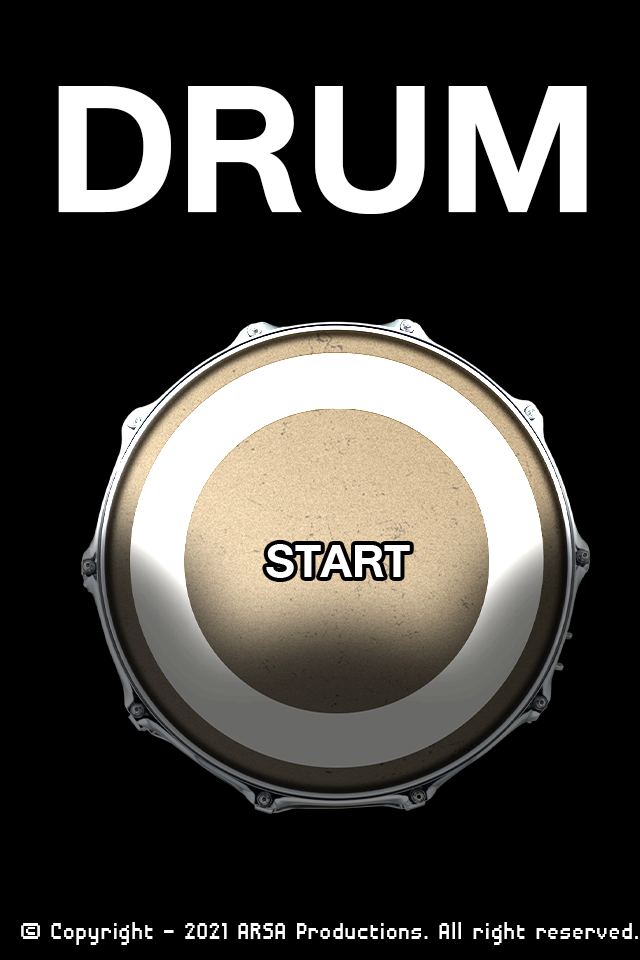
<style>
.page{position:relative;width:640px;height:960px;background:#000000}
.page>*{position:absolute;margin:0}
.t1{font:263.5px "DBHeavent-Bold";color:#ffffff}
.t2{font:31px "DisposableDroidBB";color:#ffffff;scale:0.83 1}
</style>
<div class="page">
<p class="t1" style="left:58px;top:86px;width:529px;height:128px">DRUM</p>
<p class="t2" style="left:21px;top:922px;width:617px;height:23px">(c) Copyright - 2021 ARSA Productions. All right reserved.</p>
</div>
